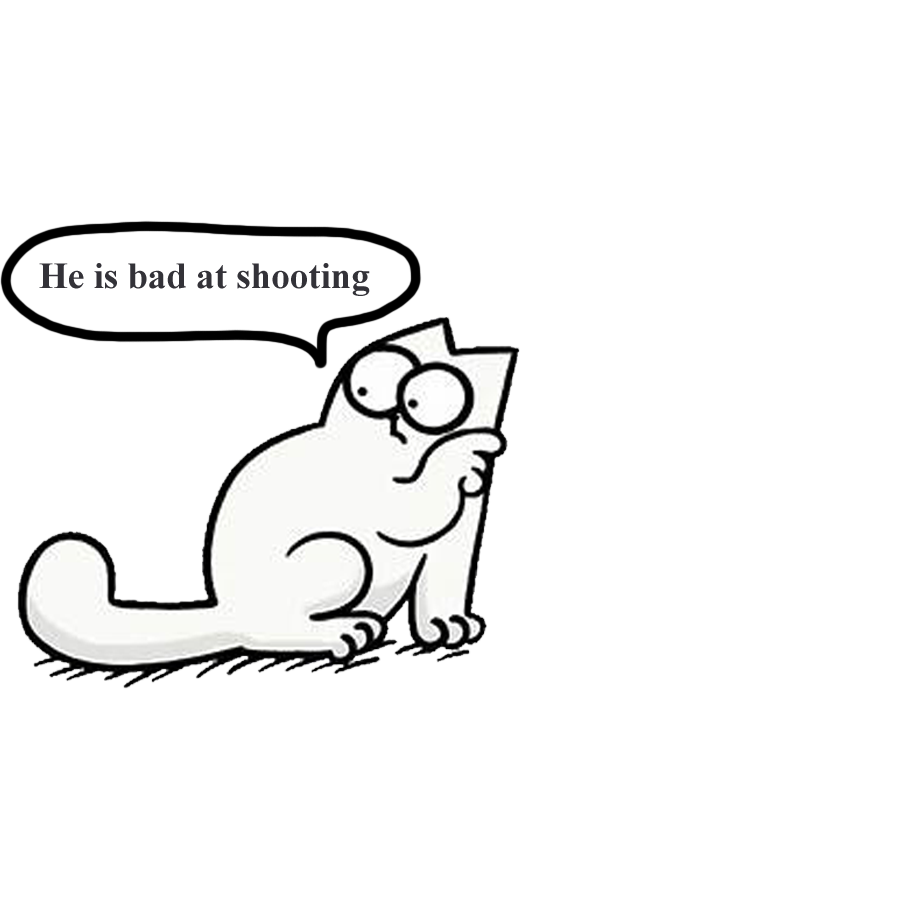
<style>
.page{position:relative;width:900px;height:911px;background:#ffffff}
.page>*{position:absolute;margin:0}
.t1{font:37px "TimesNewRomanPS-BoldMT";color:#333238}
</style>
<div class="page">
<p class="t1" style="left:39px;top:263px;width:331px;height:33px">He is bad at shooting</p>
</div>
